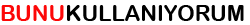
<style>
.page{position:relative;width:250px;height:25px;background:#ffffff}
.page>*{position:absolute;margin:0}
.t1{font:22px "ArialRoundedMTBold";color:#000000}
.t2{font:22px "ArialRoundedMTBold";color:#fc0707}
</style>
<div class="page">
<p class="t1" style="left:1px;top:5px;width:243px;height:16px"><span class="t2">BUNU</span>KULLANIYORUM</p>
</div>
